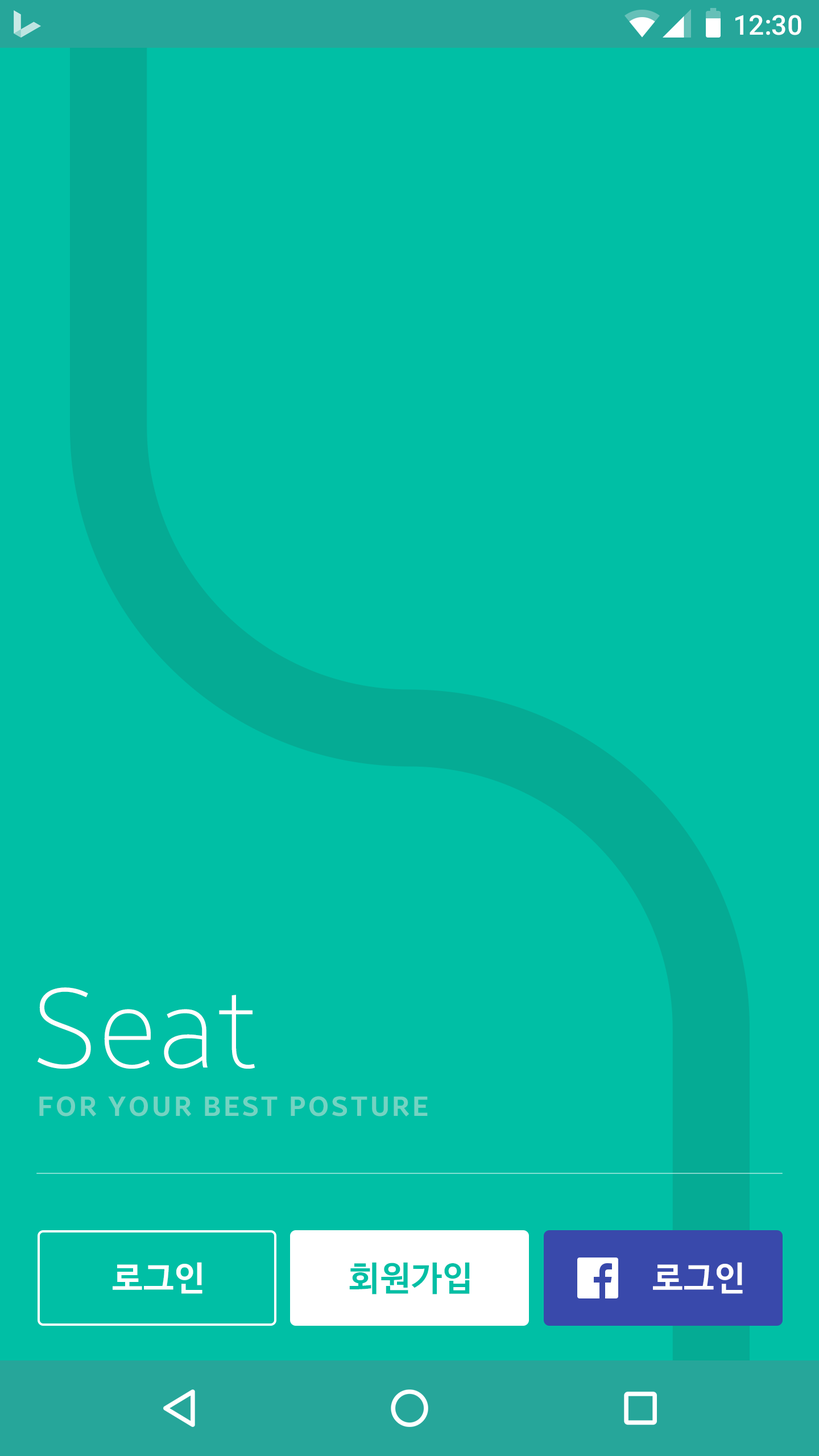
<style>
.page{position:relative;width:819px;height:1456px;background:#00bfa5}
.page>*{position:absolute;margin:0}
.t1{font:27.3px "Roboto-Medium";color:#ffffff}
.t2{font:111.5px "BreezeSans-Thin";letter-spacing:0.025em;color:#fffefe}
.t3{font:27.3px "BreezeSans-Bold";letter-spacing:0.1em;color:#74d3c2}
.t4{font:34.1px "NanumBarunGothicBold";letter-spacing:0.025em;color:#fffefe}
.t5{font:34.1px "NanumBarunGothicBold";letter-spacing:0.025em;color:#00bfa5}
</style>
<div class="page">
<p class="t1" style="left:735px;top:15px;width:66px;height:20px">12:30</p>
<p class="t2" style="left:38px;top:987px;width:217px;height:82px">Seat</p>
<p class="t3" style="left:39px;top:1096px;width:389px;height:20px">FOR YOUR BEST POSTURE</p>
<p class="t4" style="left:113px;top:1262px;width:89px;height:32px">로그인</p>
<p class="t5" style="left:349px;top:1262px;width:121px;height:32px">회원가입</p>
<p class="t4" style="left:653px;top:1262px;width:90px;height:32px">로그인</p>
</div>
